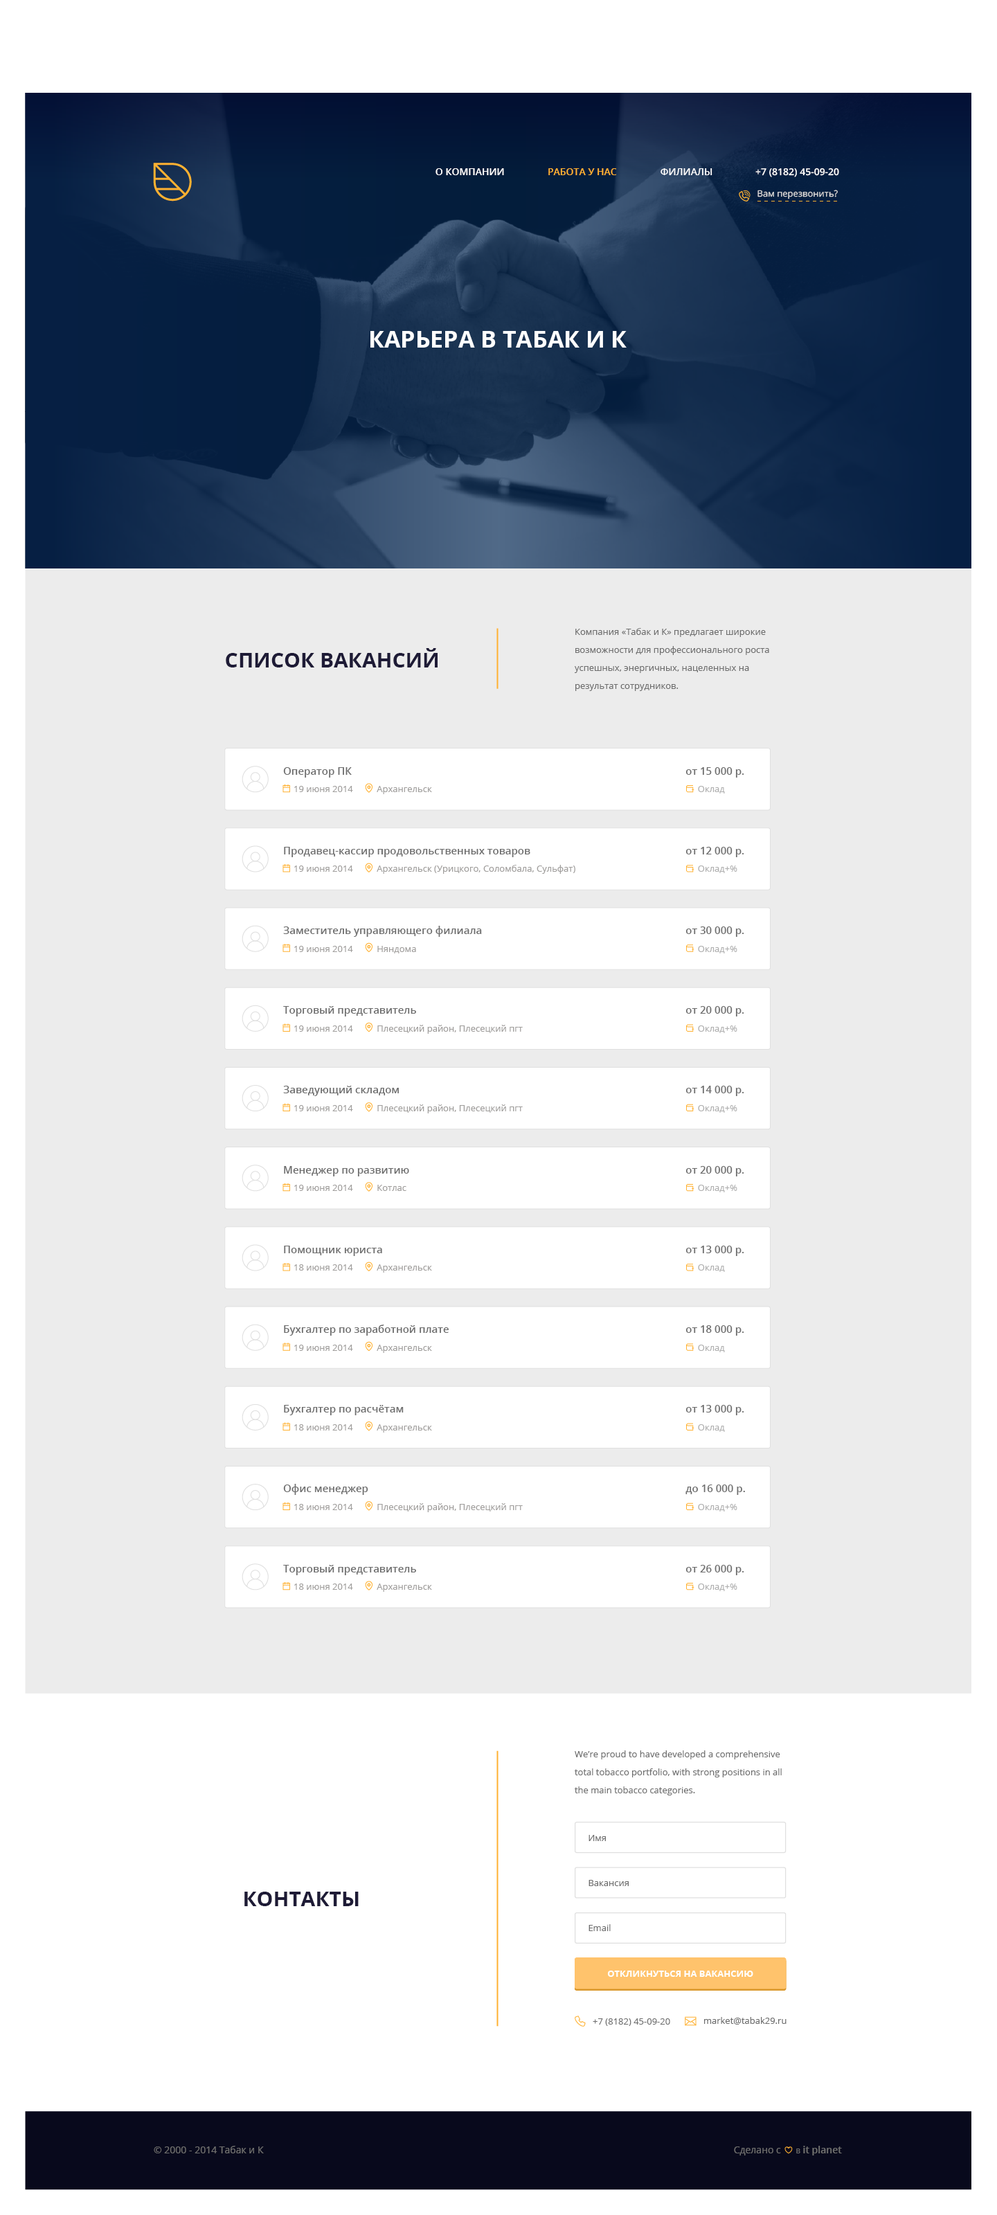
<style>
.page{position:relative;width:997px;height:2215px;background:#ffffff}
.page>*{position:absolute;margin:0}
.t1{font:9.7px "OpenSans-Semibold";color:#ffffff}
.t2{font:9.7px "OpenSans-Semibold";color:#ffb131}
.t3{font:9.6px "OpenSans-Semibold";color:#ffffff}
.t4{font:8.9px "OpenSans";color:#dfdfdf}
.t5{font:23.5px "OpenSans-Bold";color:#ffffff;text-transform:uppercase}
.t6{font:9px/12.5px "OpenSans";color:#6e6e6e}
.t7{font:20.8px "OpenSans-Bold";color:#1e1b36;text-transform:uppercase}
.t8{font:10.4px "OpenSans-Semibold";color:#6e6e6e}
.t9{font:9px "OpenSans";color:#a09e9c}
.t10{font:9px "OpenSans";color:#afafaf}
.t11{font:9px "OpenSans";color:#6e6e6e}
.t12{font:9.7px "OpenSans";color:#6e6e6e}
.t13{font:9.7px "OpenSans";color:#6e6e6e;font-variant:small-caps}
.t14{font:9.7px "OpenSans-Semibold";color:#707070}
</style>
<div class="page">
<p class="t1" style="left:435px;top:168px;width:69px;height:7px">О КОМПАНИИ</p>
<p class="t2" style="left:548px;top:168px;width:68px;height:7px">РАБОТА У НАС</p>
<p class="t1" style="left:660px;top:168px;width:52px;height:7px">ФИЛИАЛЫ</p>
<p class="t3" style="left:755px;top:168px;width:84px;height:9px">+7 (8182) 45-09-20</p>
<p class="t4" style="left:757px;top:190px;width:81px;height:9px">Вам перезвонить?</p>
<p class="t5" style="left:370px;top:331px;width:257px;height:17px">Карьера в табак и к</p>
<p class="t6" style="left:575px;top:628px;width:194px;height:63px">Компания «Табак и К» предлагает широкие <br>возможности для профессионального роста <br>успешных, энергичных, нацеленных на <br>результат сотрудников.</p>
<p class="t7" style="left:226px;top:648px;width:212px;height:19px">СПИСОК ВАКАНСИЙ</p>
<p class="t8" style="left:283px;top:767px;width:69px;height:10px">Оператор ПК</p>
<p class="t8" style="left:685px;top:767px;width:59px;height:10px">от 15 000 р.</p>
<p class="t9" style="left:294px;top:786px;width:59px;height:6px">19 июня 2014</p>
<p class="t9" style="left:377px;top:786px;width:55px;height:8px">Архангельск</p>
<p class="t10" style="left:698px;top:786px;width:27px;height:7px">Оклад</p>
<p class="t8" style="left:284px;top:847px;width:246px;height:10px">Продавец-кассир продовольственных товаров</p>
<p class="t8" style="left:685px;top:847px;width:59px;height:10px">от 12 000 р.</p>
<p class="t9" style="left:294px;top:865px;width:59px;height:7px">19 июня 2014</p>
<p class="t9" style="left:377px;top:865px;width:198px;height:9px">Архангельск (Урицкого, Соломбала, Сульфат)</p>
<p class="t10" style="left:698px;top:865px;width:39px;height:8px">Оклад+%</p>
<p class="t8" style="left:283px;top:926px;width:199px;height:11px">Заместитель управляющего филиала</p>
<p class="t8" style="left:685px;top:926px;width:59px;height:11px">от 30 000 р.</p>
<p class="t9" style="left:294px;top:946px;width:59px;height:6px">19 июня 2014</p>
<p class="t9" style="left:377px;top:946px;width:39px;height:7px">Няндома</p>
<p class="t10" style="left:698px;top:946px;width:39px;height:7px">Оклад+%</p>
<p class="t8" style="left:283px;top:1006px;width:133px;height:10px">Торговый представитель</p>
<p class="t8" style="left:685px;top:1006px;width:59px;height:10px">от 20 000 р.</p>
<p class="t9" style="left:294px;top:1025px;width:59px;height:7px">19 июня 2014</p>
<p class="t9" style="left:377px;top:1025px;width:146px;height:9px">Плесецкий район, Плесецкий пгт</p>
<p class="t10" style="left:698px;top:1025px;width:39px;height:8px">Оклад+%</p>
<p class="t8" style="left:283px;top:1086px;width:116px;height:10px">Заведующий складом</p>
<p class="t8" style="left:685px;top:1086px;width:59px;height:10px">от 14 000 р.</p>
<p class="t9" style="left:294px;top:1105px;width:59px;height:6px">19 июня 2014</p>
<p class="t9" style="left:377px;top:1104px;width:146px;height:9px">Плесецкий район, Плесецкий пгт</p>
<p class="t10" style="left:698px;top:1105px;width:39px;height:8px">Оклад+%</p>
<p class="t8" style="left:284px;top:1166px;width:125px;height:10px">Менеджер по развитию</p>
<p class="t8" style="left:685px;top:1166px;width:59px;height:10px">от 20 000 р.</p>
<p class="t9" style="left:294px;top:1185px;width:59px;height:6px">19 июня 2014</p>
<p class="t9" style="left:377px;top:1185px;width:29px;height:6px">Котлас</p>
<p class="t10" style="left:698px;top:1185px;width:39px;height:7px">Оклад+%</p>
<p class="t8" style="left:284px;top:1245px;width:98px;height:11px">Помощник юриста</p>
<p class="t8" style="left:685px;top:1245px;width:59px;height:11px">от 13 000 р.</p>
<p class="t9" style="left:294px;top:1264px;width:59px;height:6px">18 июня 2014</p>
<p class="t9" style="left:377px;top:1264px;width:55px;height:8px">Архангельск</p>
<p class="t10" style="left:698px;top:1264px;width:27px;height:8px">Оклад</p>
<p class="t8" style="left:284px;top:1324px;width:165px;height:11px">Бухгалтер по заработной плате</p>
<p class="t8" style="left:685px;top:1325px;width:59px;height:10px">от 18 000 р.</p>
<p class="t9" style="left:294px;top:1344px;width:59px;height:7px">19 июня 2014</p>
<p class="t9" style="left:377px;top:1344px;width:55px;height:9px">Архангельск</p>
<p class="t10" style="left:698px;top:1344px;width:27px;height:8px">Оклад</p>
<p class="t8" style="left:284px;top:1405px;width:120px;height:10px">Бухгалтер по расчётам</p>
<p class="t8" style="left:685px;top:1405px;width:59px;height:10px">от 13 000 р.</p>
<p class="t9" style="left:294px;top:1424px;width:59px;height:6px">18 июня 2014</p>
<p class="t9" style="left:377px;top:1424px;width:55px;height:8px">Архангельск</p>
<p class="t10" style="left:698px;top:1424px;width:27px;height:8px">Оклад</p>
<p class="t8" style="left:283px;top:1484px;width:85px;height:11px">Офис менеджер</p>
<p class="t8" style="left:685px;top:1484px;width:60px;height:11px">до 16 000 р.</p>
<p class="t9" style="left:294px;top:1504px;width:59px;height:6px">18 июня 2014</p>
<p class="t9" style="left:377px;top:1503px;width:146px;height:9px">Плесецкий район, Плесецкий пгт</p>
<p class="t10" style="left:698px;top:1504px;width:39px;height:7px">Оклад+%</p>
<p class="t8" style="left:283px;top:1565px;width:133px;height:10px">Торговый представитель</p>
<p class="t8" style="left:685px;top:1565px;width:59px;height:10px">от 26 000 р.</p>
<p class="t9" style="left:294px;top:1583px;width:59px;height:7px">18 июня 2014</p>
<p class="t9" style="left:377px;top:1583px;width:55px;height:9px">Архангельск</p>
<p class="t10" style="left:698px;top:1583px;width:39px;height:8px">Оклад+%</p>
<p class="t6" style="left:575px;top:1750px;width:207px;height:45px">We’re proud to have developed a comprehensive<br>total tobacco portfolio, with strong positions in all <br>the main tobacco categories.</p>
<p class="t11" style="left:588px;top:1835px;width:18px;height:6px">Имя</p>
<p class="t11" style="left:588px;top:1880px;width:41px;height:6px">Вакансия</p>
<p class="t7" style="left:244px;top:1891px;width:115px;height:15px">КОНТАКТЫ</p>
<p class="t11" style="left:588px;top:1924px;width:23px;height:7px">Email</p>
<p class="t11" style="left:593px;top:2018px;width:77px;height:8px">+7 (8182) 45-09-20</p>
<p class="t11" style="left:704px;top:2017px;width:82px;height:7px">market@tabak29.ru</p>
<p class="t12" style="left:154px;top:2145px;width:110px;height:8px">© 2000 - 2014 Табак и К</p>
<p class="t12" style="left:734px;top:2145px;width:108px;height:10px">Сделано с <span class="t13">     в </span><span class="t14">it planet</span></p>
</div>
